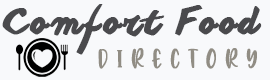
<style>
.page{position:relative;width:270px;height:80px;background:#f8f9fb}
.page>*{position:absolute;margin:0}
.t1{font:36.4px "Anothershabby";letter-spacing:0.08em;color:#4a4a4d;font-weight:bold}
.t2{font:28px "AvocadoCreamy";letter-spacing:0.34em;color:#918d84;font-weight:bold;scale:0.86 1}
</style>
<div class="page">
<p class="t1" style="left:2px;top:4px;width:260px;height:51px">Comfort Food</p>
<p class="t2" style="left:98px;top:48px;width:159px;height:21px">DIRECTORY</p>
</div>
